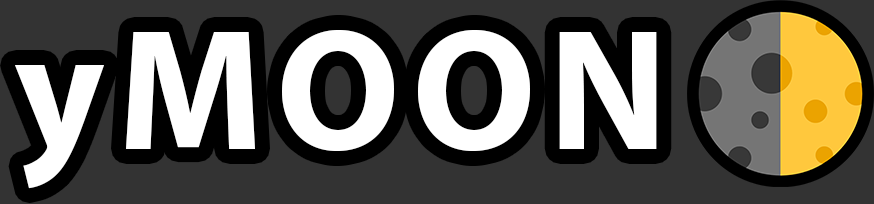
<style>
.page{position:relative;width:874px;height:204px;background:#333333}
.page>*{position:absolute;margin:0}
.t1{font:173.3px "MyriadPro-Bold";letter-spacing:0.07em;color:#ffffff}
</style>
<div class="page">
<p class="t1" style="left:15px;top:30px;width:642px;height:159px">yMOON</p>
</div>
